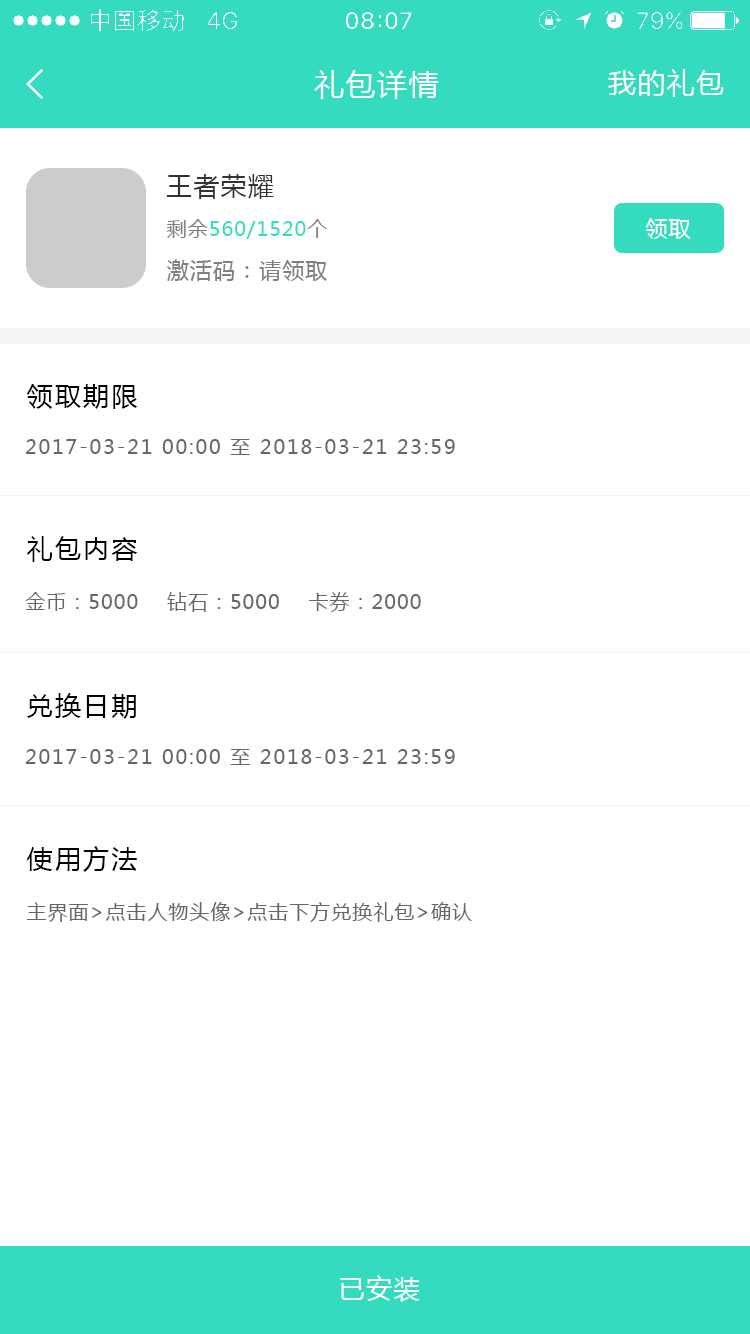
<style>
.page{position:relative;width:750px;height:1334px;background:#ffffff}
.page>*{position:absolute;margin:0}
.t1{font:30px "MicrosoftYaHei";letter-spacing:0.05em;color:#ffffff}
.t2{font:28px "MicrosoftYaHei";letter-spacing:0.05em;color:#ffffff}
.t3{font:26px "MicrosoftYaHei";letter-spacing:0.05em;color:#333333}
.t4{font:20px "MicrosoftYaHei";letter-spacing:0.05em;color:#34dbbf}
.t5{font:20px "MicrosoftYaHei";letter-spacing:0.05em;color:#808080}
.t6{font:22px "MicrosoftYaHei";letter-spacing:0.05em;color:#ffffff}
.t7{font:22px "MicrosoftYaHei";letter-spacing:0.05em;color:#808080}
.t8{font:26px "MicrosoftYaHei";letter-spacing:0.09em;color:#000000}
.t9{font:20px "MicrosoftYaHei";letter-spacing:0.09em;color:#666666}
.t10{font:20px "MicrosoftYaHei";letter-spacing:0.05em;color:#666666}
.t11{font:26px "MicrosoftYaHei";letter-spacing:0.05em;color:#ffffff}
</style>
<div class="page">
<p class="t1" style="left:314px;top:70px;width:125px;height:29px">礼包详情</p>
<p class="t2" style="left:608px;top:69px;width:116px;height:28px">我的礼包</p>
<p class="t3" style="left:166px;top:174px;width:108px;height:25px">王者荣耀</p>
<p class="t4" style="left:167px;top:219px;width:160px;height:20px"><span class="t5">剩余</span>560/1520<span class="t5">个</span></p>
<p class="t6" style="left:645px;top:218px;width:46px;height:21px">领取</p>
<p class="t7" style="left:167px;top:259px;width:160px;height:22px">激活码：请领取</p>
<p class="t8" style="left:26px;top:384px;width:112px;height:25px">领取期限</p>
<p class="t9" style="left:25px;top:439px;width:430px;height:16px">2017-03-21 00:00 至 2018-03-21 23:59</p>
<p class="t8" style="left:27px;top:536px;width:111px;height:26px">礼包内容</p>
<p class="t10" style="left:25px;top:592px;width:396px;height:20px">金币：5000    钻石：5000    卡券：2000</p>
<p class="t8" style="left:27px;top:693px;width:109px;height:26px">兑换日期</p>
<p class="t9" style="left:25px;top:749px;width:430px;height:16px">2017-03-21 00:00 至 2018-03-21 23:59</p>
<p class="t8" style="left:26px;top:846px;width:111px;height:26px">使用方法</p>
<p class="t10" style="left:26px;top:902px;width:446px;height:20px">主界面&gt;点击人物头像&gt;点击下方兑换礼包&gt;确认</p>
<p class="t11" style="left:340px;top:1275px;width:80px;height:27px">已安装</p>
</div>
